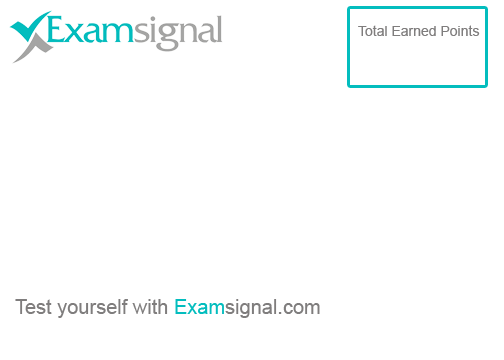
<style>
.page{position:relative;width:504px;height:360px;background:#ffffff}
.page>*{position:absolute;margin:0}
.t1{font:14px "ArialMT";color:#7f7d7d}
.t2{font:20px "ArialMT";color:#7f7d7d}
.t3{font:20px "ArialMT";color:#03bdbe}
</style>
<div class="page">
<p class="t1" style="left:358px;top:25px;width:122px;height:11px">Total Earned Points</p>
<p class="t2" style="left:15px;top:299px;width:305px;height:19px">Test yourself with <span class="t3">Exam</span>signal.com</p>
</div>
